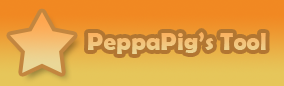
<style>
.page{position:relative;width:284px;height:86px}
.page>*{position:absolute;margin:0}
.t1{font:25px "BerlinSansFBDemi-Bold";color:#f2c37a}
</style>
<div class="page">
<p class="t1" style="left:88px;top:32px;width:178px;height:22px">PeppaPig’s Tool</p>
</div>
